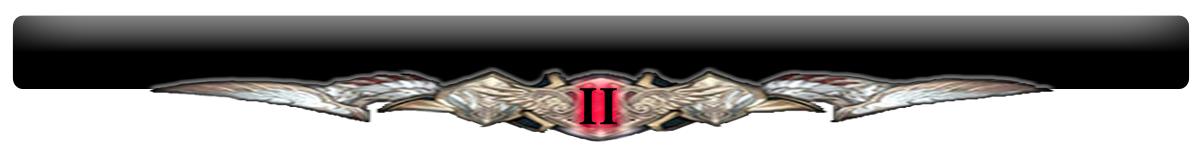
<style>
.page{position:relative;width:1200px;height:150px;background:#ffffff}
.page>*{position:absolute;margin:0}
.t1{font:50px "CenturyOldstyleTL-Bold";color:#000000}
</style>
<div class="page">
<p class="t1" style="left:579px;top:88px;width:38px;height:37px">II</p>
</div>
